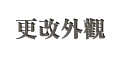
<style>
.page{position:relative;width:120px;height:57px;background:#ffffff}
.page>*{position:absolute;margin:0}
.t1{font:22px "RyuminPr6N-ExBold";color:#66615a;font-weight:bold}
</style>
<div class="page">
<p class="t1" style="left:16px;top:18px;width:89px;height:22px">更改外觀</p>
</div>
